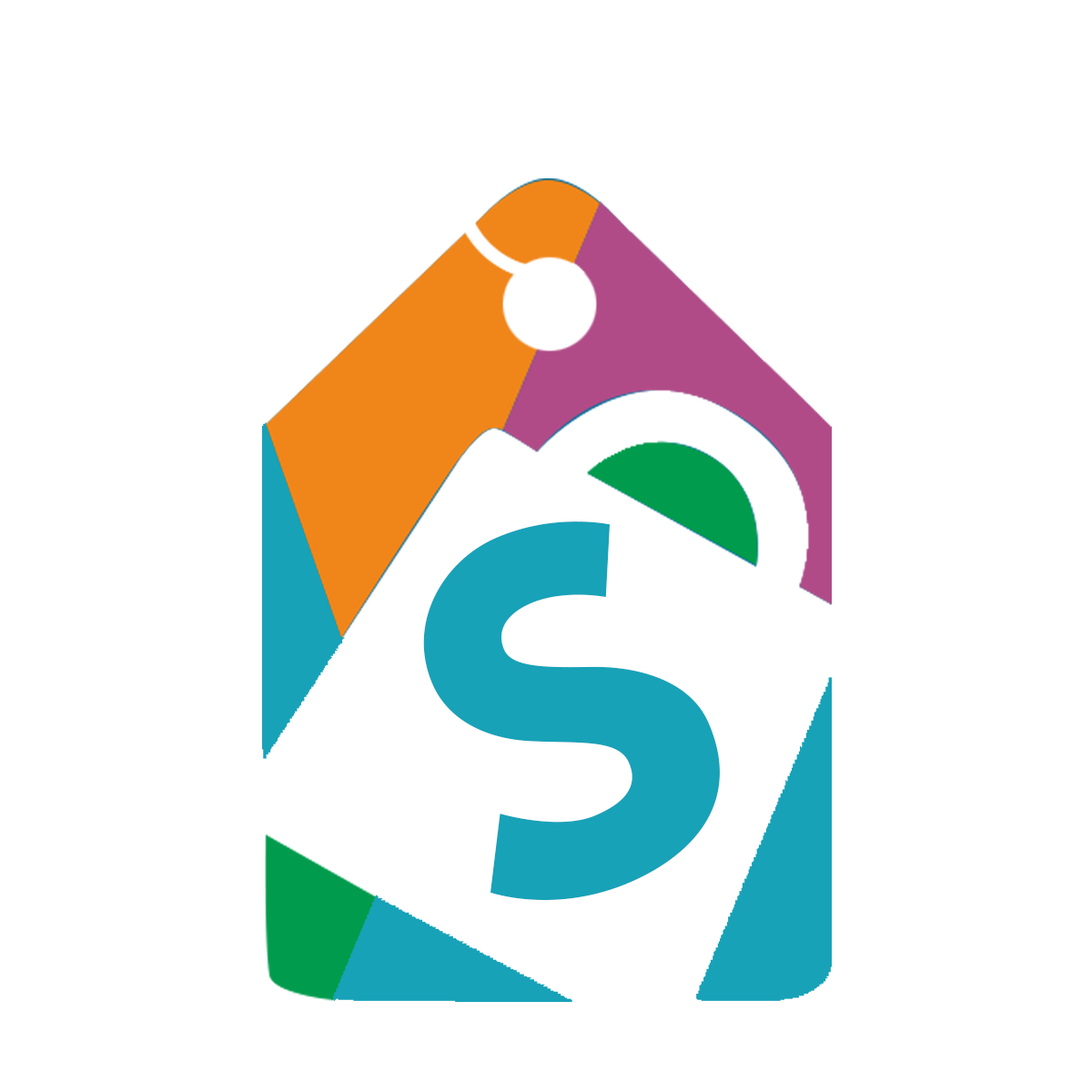
<style>
.page{position:relative;width:1092px;height:1092px;background:#ffffff}
.page>*{position:absolute;margin:0}
.t1{font:431.8px "LeagueSpartan-Bold";color:#17a2b8}
</style>
<div class="page">
<p class="t1" style="left:423px;top:521px;width:297px;height:379px;rotate:-24deg">S</p>
</div>
